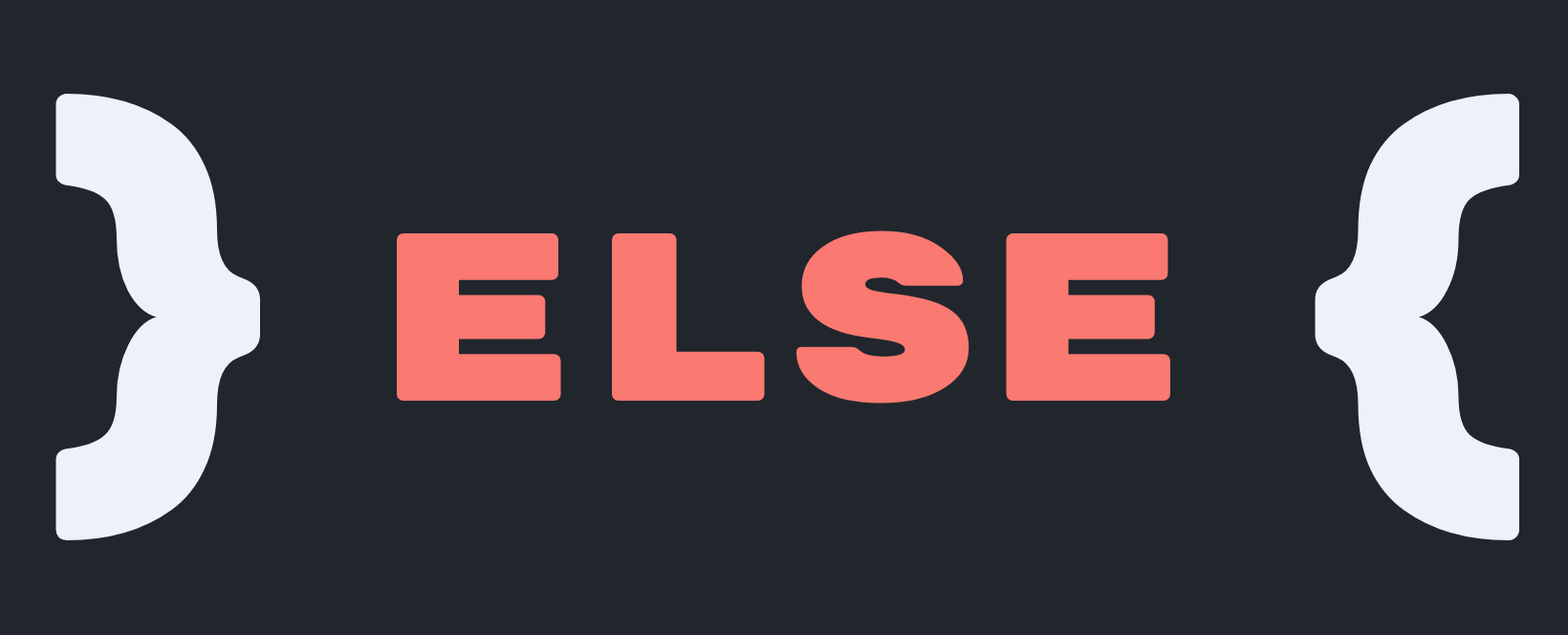
<style>
.page{position:relative;width:1568px;height:635px;background:#21262d}
.page>*{position:absolute;margin:0}
.t1{font:478px "RubikMonoOne-Regular";color:#ecf2f8}
.t2{font:239px "RubikMonoOne-Regular";color:#fa7970}
</style>
<div class="page">
<p class="t1" style="left:55px;top:94px;width:205px;height:446px">}</p>
<p class="t1" style="left:1315px;top:94px;width:204px;height:446px">{</p>
<p class="t2" style="left:397px;top:230px;width:773px;height:173px">else</p>
</div>
